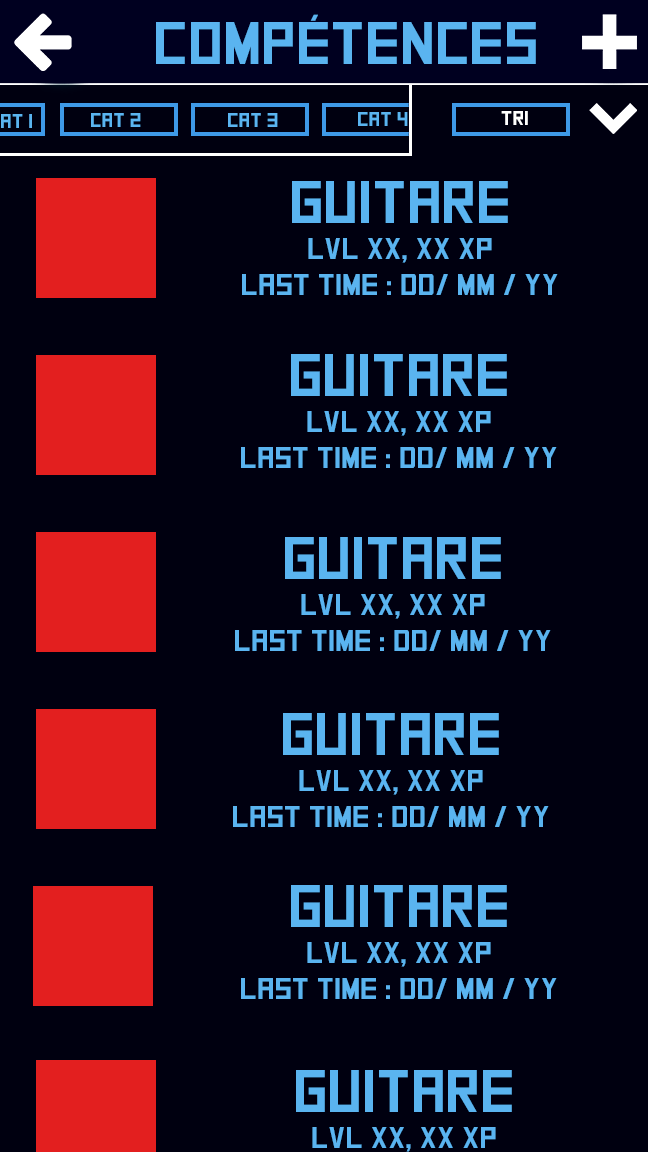
<style>
.page{position:relative;width:648px;height:1152px;background:#000010}
.page>*{position:absolute;margin:0}
.t1{font:60px "SquareFont";color:#5ab4f0}
.t2{font:20px "SquareFont";color:#5ab4f0}
.t3{font:20px "SquareFont";color:#ffffff}
.t4{font:30px "SquareFont";color:#5ab4f0}
</style>
<div class="page">
<p class="t1" style="left:156px;top:14px;width:380px;height:50px">COmpétences</p>
<p class="t2" style="left:91px;top:113px;width:50px;height:14px">Cat 2</p>
<p class="t2" style="left:228px;top:113px;width:50px;height:14px">Cat 3</p>
<p class="t2" style="left:358px;top:112px;width:50px;height:14px">Cat 4</p>
<p class="t3" style="left:501px;top:111px;width:27px;height:14px">tri</p>
<p class="t4" style="left:242px;top:181px;width:316px;height:114px;text-align:center"><span class="t1">Guitare<br></span>lvl XX, XX xp<br>Last time : DD/ MM / YY</p>
<p class="t4" style="left:241px;top:354px;width:316px;height:114px;text-align:center"><span class="t1">Guitare<br></span>lvl XX, XX xp<br>Last time : DD/ MM / YY</p>
<p class="t4" style="left:235px;top:537px;width:316px;height:114px;text-align:center"><span class="t1">Guitare<br></span>lvl XX, XX xp<br>Last time : DD/ MM / YY</p>
<p class="t4" style="left:233px;top:713px;width:316px;height:114px;text-align:center"><span class="t1">Guitare<br></span>lvl XX, XX xp<br>Last time : DD/ MM / YY</p>
<p class="t4" style="left:241px;top:885px;width:316px;height:114px;text-align:center"><span class="t1">Guitare<br></span>lvl XX, XX xp<br>Last time : DD/ MM / YY</p>
</div>
